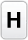
<style>
.page{position:relative;width:28px;height:40px}
.page>*{position:absolute;margin:0}
.t1{font:22px "Helvetica-Bold";color:#000000;text-transform:uppercase}
</style>
<div class="page">
<p class="t1" style="left:7px;top:12px;width:14px;height:16px">H</p>
</div>
